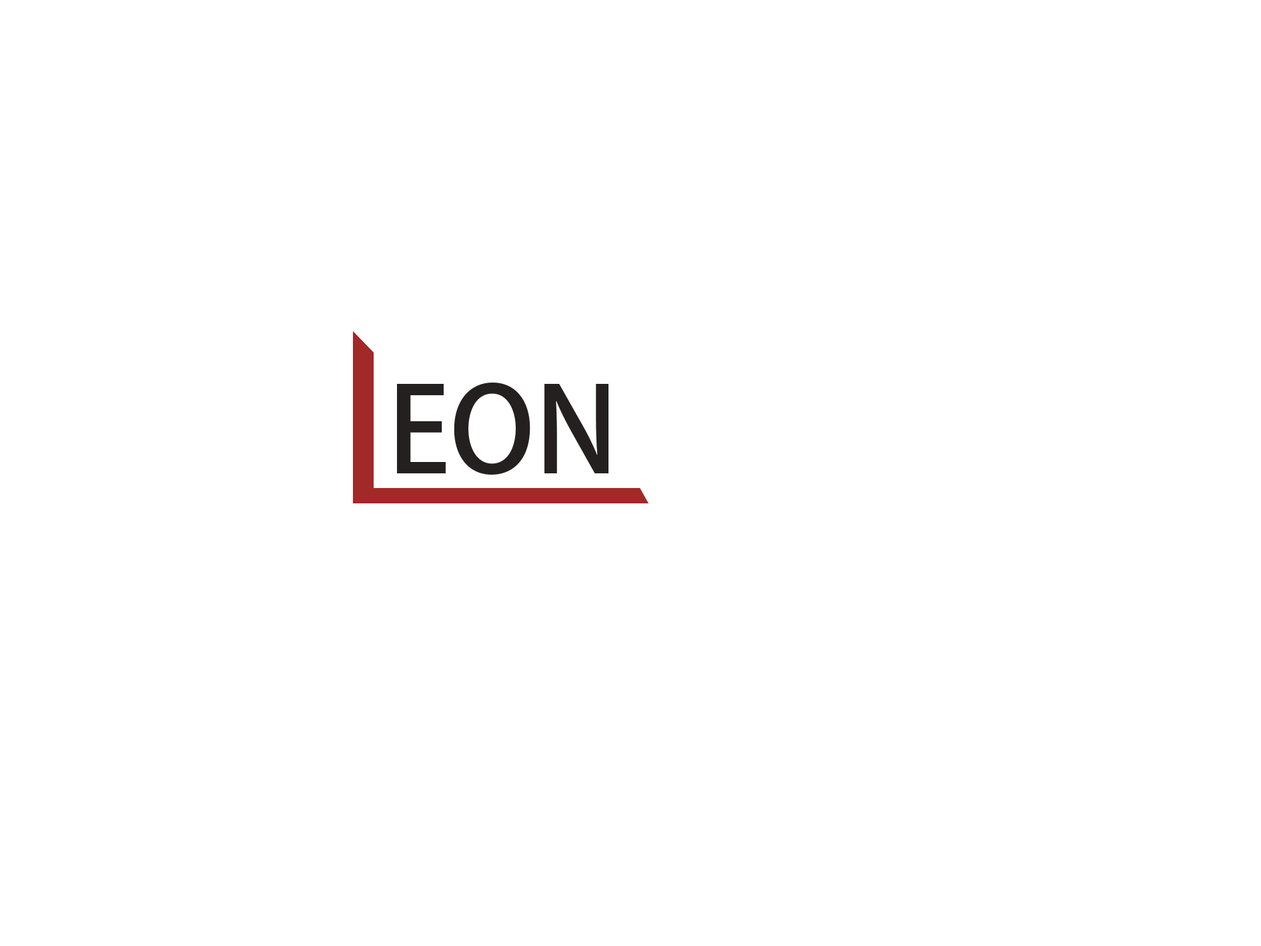
<style>
.page{position:relative;width:1261px;height:946px;background:#ffffff}
.page>*{position:absolute;margin:0}
.t1{font:116.8px "AdobeFanHeitiStd-Bold";color:#252020}
</style>
<div class="page">
<p class="t1" style="left:397px;top:382px;width:212px;height:92px">EON</p>
</div>
